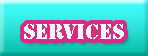
<style>
.page{position:relative;width:148px;height:56px}
.page>*{position:absolute;margin:0}
.t1{font:20px "StencilStd";color:#fcf6f6}
</style>
<div class="page">
<p class="t1" style="left:24px;top:24px;width:100px;height:15px">SERVICES</p>
</div>
